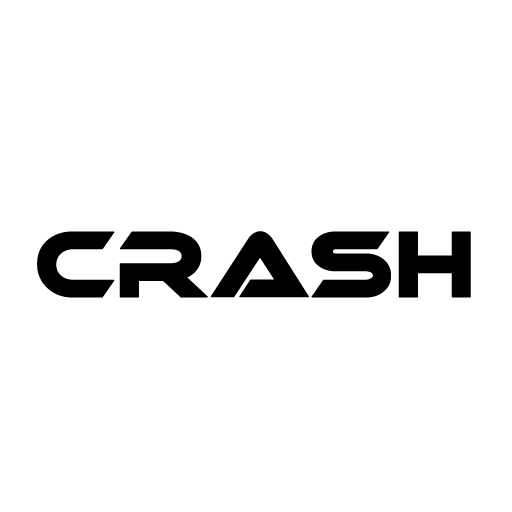
<style>
.page{position:relative;width:512px;height:512px;background:#ffffff}
.page>*{position:absolute;margin:0}
.t1{font:90px "Ethnocentric";color:#000000;font-weight:bold;scale:0.9 1}
</style>
<div class="page">
<p class="t1" style="left:37px;top:231px;width:434px;height:67px">CRASH</p>
</div>
